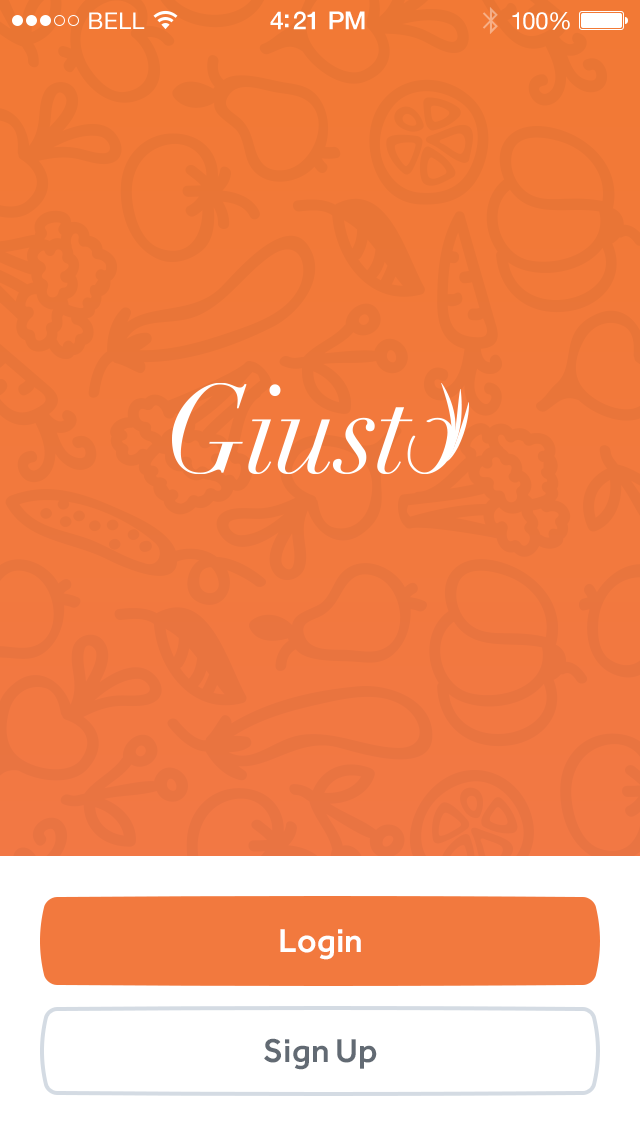
<style>
.page{position:relative;width:640px;height:1136px}
.page>*{position:absolute;margin:0}
.t1{font:23px "HelveticaNeue";letter-spacing:0.02em;color:#ffffff}
.t2{font:25px "HelveticaNeue-Medium";letter-spacing:-0.02em;color:#ffffff}
.t3{font:24px "HelveticaNeue";letter-spacing:-0.02em;color:#ffffff}
.t4{font:34px "Effra-Medium";color:#ffffff}
.t5{font:34px "Effra-Medium";color:#626a73}
</style>
<div class="page">
<p class="t1" style="left:89px;top:12px;width:56px;height:17px">BELL</p>
<p class="t2" style="left:270px;top:11px;width:95px;height:19px">4:21 PM</p>
<p class="t3" style="left:512px;top:12px;width:58px;height:18px">100%</p>
<p class="t4" style="left:280px;top:929px;width:81px;height:31px">Login</p>
<p class="t5" style="left:264px;top:1038px;width:113px;height:32px">Sign Up</p>
</div>
